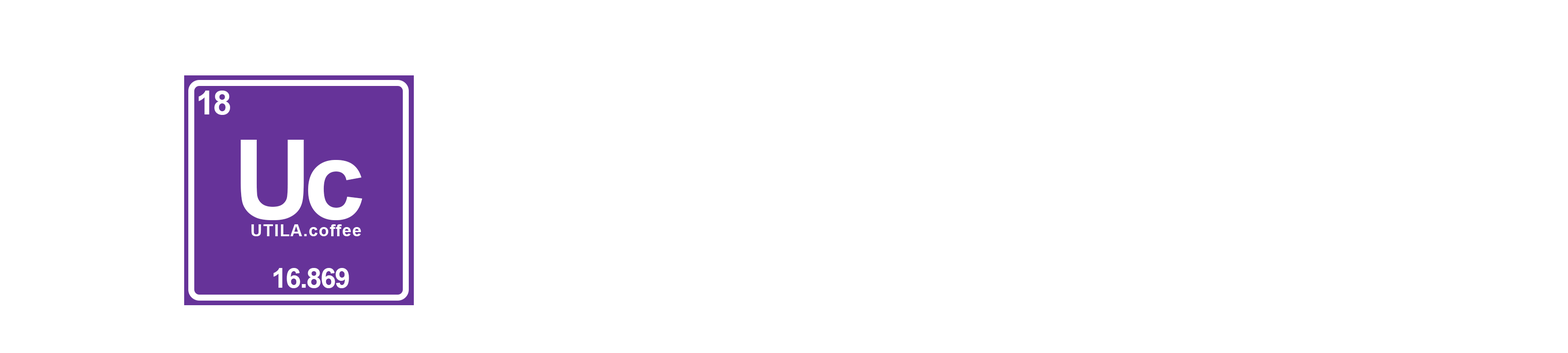
<style>
.page{position:relative;width:1568px;height:353px;background:#ffffff}
.page>*{position:absolute;margin:0}
.t1{font:33.1px "Arial-BoldMT";letter-spacing:-0.04em;color:#ffffff}
.t2{font:110.2px "Arial-BoldMT";letter-spacing:-0.04em;color:#ffffff}
.t3{font:16.5px "Arial-BoldMT";letter-spacing:0.05em;color:#ffffff}
.t4{font:27.6px "Arial-BoldMT";letter-spacing:-0.04em;color:#ffffff}
</style>
<div class="page">
<p class="t1" style="left:198px;top:90px;width:32px;height:25px">18</p>
<p class="t2" style="left:241px;top:140px;width:63px;height:80px">U</p>
<p class="t2" style="left:308px;top:160px;width:54px;height:60px">c</p>
<p class="t3" style="left:251px;top:224px;width:110px;height:12px">UTILA.coffee</p>
<p class="t4" style="left:273px;top:268px;width:76px;height:20px">16.869</p>
</div>
